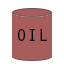
<style>
.page{position:relative;width:64px;height:64px;background:#ffffff}
.page>*{position:absolute;margin:0}
.t1{font:18px "OratorStd";color:#000000}
</style>
<div class="page">
<p class="t1" style="left:18px;top:29px;width:29px;height:12px">OIL</p>
</div>
